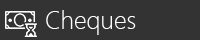
<style>
.page{position:relative;width:200px;height:40px;background:#333333}
.page>*{position:absolute;margin:0}
.t1{font:25px "SegoeUI-Light";color:#ffffff}
</style>
<div class="page">
<p class="t1" style="left:46px;top:10px;width:90px;height:25px">Cheques</p>
</div>
